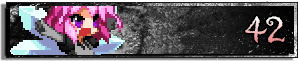
<style>
.page{position:relative;width:298px;height:61px}
.page>*{position:absolute;margin:0}
.t1{font:44px "Gigi-Regular";letter-spacing:-0.05em}
</style>
<div class="page">
<p class="t1" style="left:245px;top:16px;width:40px;height:27px">42</p>
</div>
